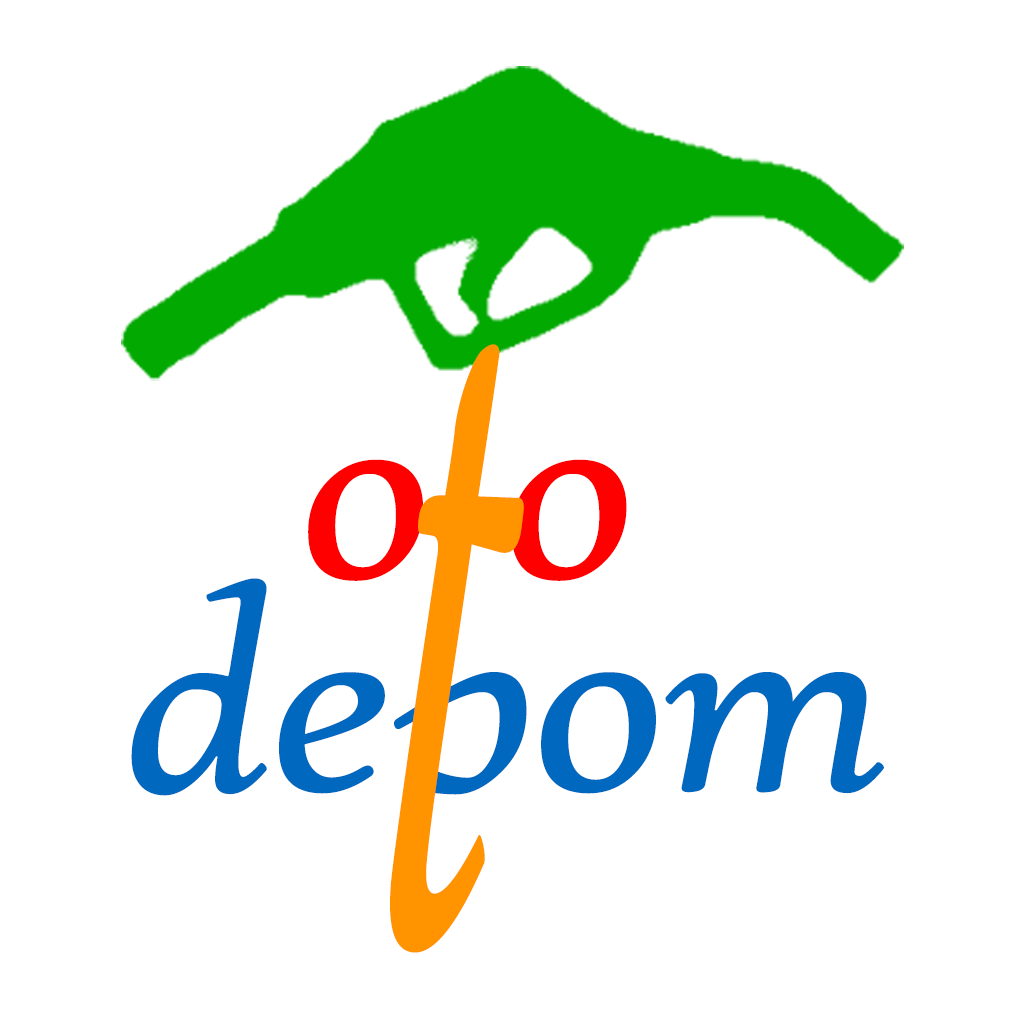
<style>
.page{position:relative;width:1024px;height:1024px;background:#ffffff}
.page>*{position:absolute;margin:0}
.t1{font:1209.8px "HighTowerText-Italic";letter-spacing:-0.05em;color:#ff9500;font-weight:bold;scale:0.37 1}
.t2{font:304.9px "HighTowerText-Italic";letter-spacing:-0.05em;color:#ff0000;font-weight:bold;scale:1.1 1}
.t3{font:304.9px "HighTowerText-Italic";letter-spacing:-0.05em;color:#0068bf;font-weight:bold;scale:1.1 1}
</style>
<div class="page">
<p class="t1" style="left:390px;top:344px;width:134px;height:609px;rotate:4deg">t</p>
<p class="t2" style="left:308px;top:459px;width:319px;height:122px">o o</p>
<p class="t3" style="left:131px;top:578px;width:753px;height:290px">depom</p>
</div>
